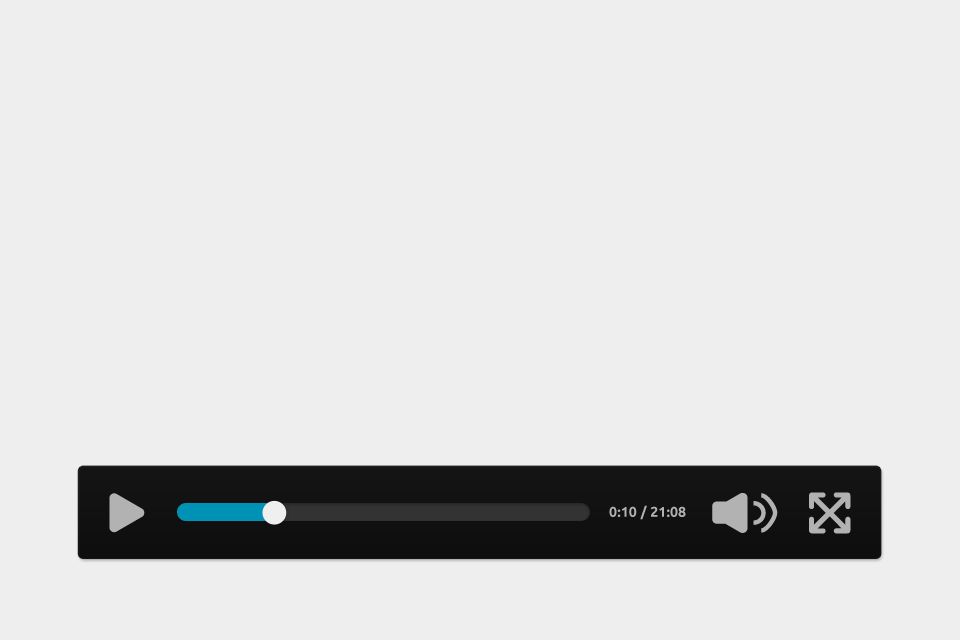
<style>
.page{position:relative;width:960px;height:640px;background:#eeeeee}
.page>*{position:absolute;margin:0}
.t1{font:14px "Ubuntu-Bold";letter-spacing:0.01em;color:#b2b2b2}
</style>
<div class="page">
<p class="t1" style="left:609px;top:505px;width:77px;height:15px">0:10 / 21:08</p>
</div>
